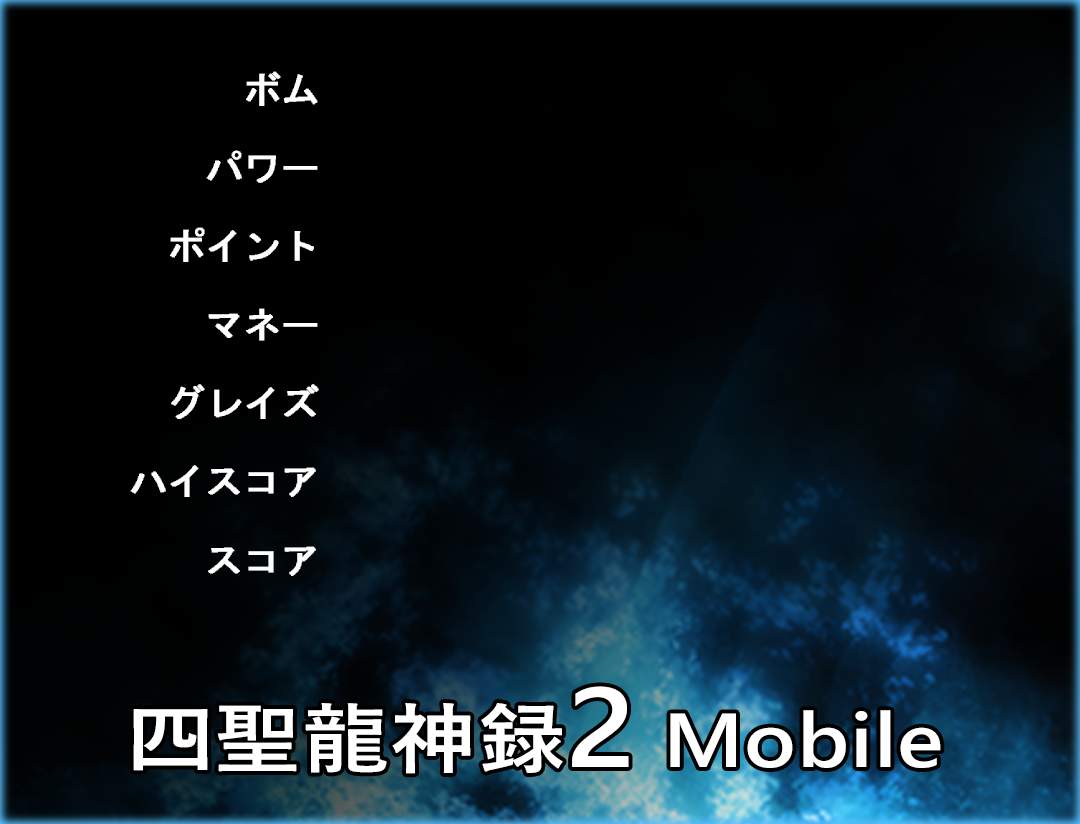
<style>
.page{position:relative;width:1080px;height:824px;background:#000000}
.page>*{position:absolute;margin:0}
.t1{font:40px/78.4px "Terminal";letter-spacing:0.01em;color:#ffffff;font-weight:bold}
.t2{font:76.5px "YuGothicUI-Semibold";letter-spacing:0.01em;color:#ffffff;scale:1.14 1}
.t3{font:112.6px "YuGothicUI-Semibold";letter-spacing:0.01em;color:#ffffff;scale:1.14 1}
</style>
<div class="page">
<p class="t1" style="left:130px;top:71px;width:189px;height:505px;text-align:right">ボム<br>パワー<br>ポイント<br>マネー<br>グレイズ<br>ハイスコア<br>スコア</p>
<p class="t2" style="left:133px;top:686px;width:808px;height:88px">四聖龍神録<span class="t3">2</span> Mobile</p>
</div>
